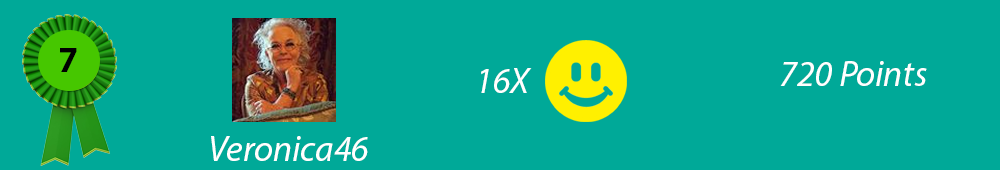
<style>
.page{position:relative;width:1000px;height:170px;background:#00a998}
.page>*{position:absolute;margin:0}
.t1{font:36px "MyriadPro-Bold";color:#000000}
.t2{font:36px "MyriadPro-It";color:#ffffff}
</style>
<div class="page">
<p class="t1" style="left:60px;top:48px;width:17px;height:24px">7</p>
<p class="t2" style="left:780px;top:61px;width:147px;height:25px">720 Points</p>
<p class="t2" style="left:481px;top:68px;width:51px;height:25px">16X</p>
<p class="t2" style="left:211px;top:136px;width:157px;height:25px">Veronica46</p>
</div>
